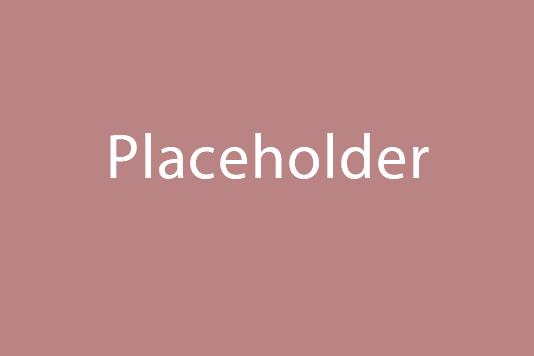
<style>
.page{position:relative;width:534px;height:356px;background:#ba8484}
.page>*{position:absolute;margin:0}
.t1{font:62.5px "MyriadPro-Regular";letter-spacing:0.025em;color:#ffffff}
</style>
<div class="page">
<p class="t1" style="left:110px;top:133px;width:319px;height:46px">Placeholder</p>
</div>
